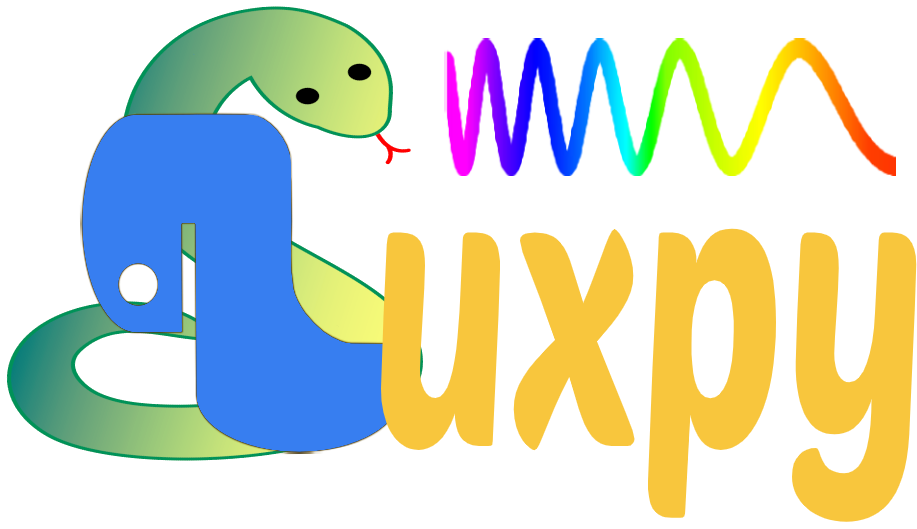
<style>
.page{position:relative;width:917px;height:529px;background:#ffffff}
.page>*{position:absolute;margin:0}
.t1{font:388.1px "PoetsenOne-Regular";color:#f8c63d;scale:0.6 1}
</style>
<div class="page">
<p class="t1" style="left:381px;top:228px;width:536px;height:294px">uxpy</p>
</div>
